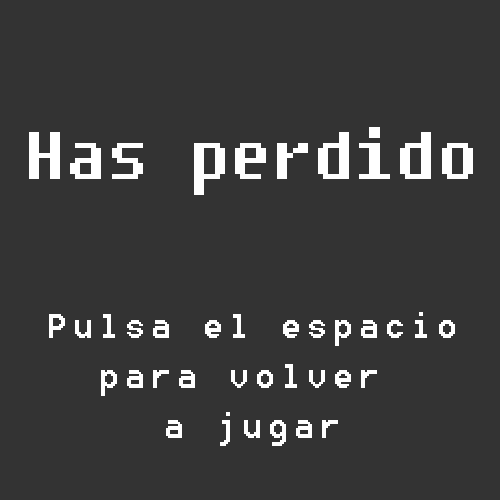
<style>
.page{position:relative;width:500px;height:500px;background:#333333}
.page>*{position:absolute;margin:0}
.t1{font:66.3px "Fixedsys";color:#ffffff}
.t2{font:41.7px "Fixedsys";color:#ffffff}
</style>
<div class="page">
<p class="t1" style="left:29px;top:127px;width:444px;height:68px">Has perdido</p>
<p class="t2" style="left:49px;top:312px;width:406px;height:134px;text-align:center">Pulsa el espacio<br>para volver <br>a jugar</p>
</div>
